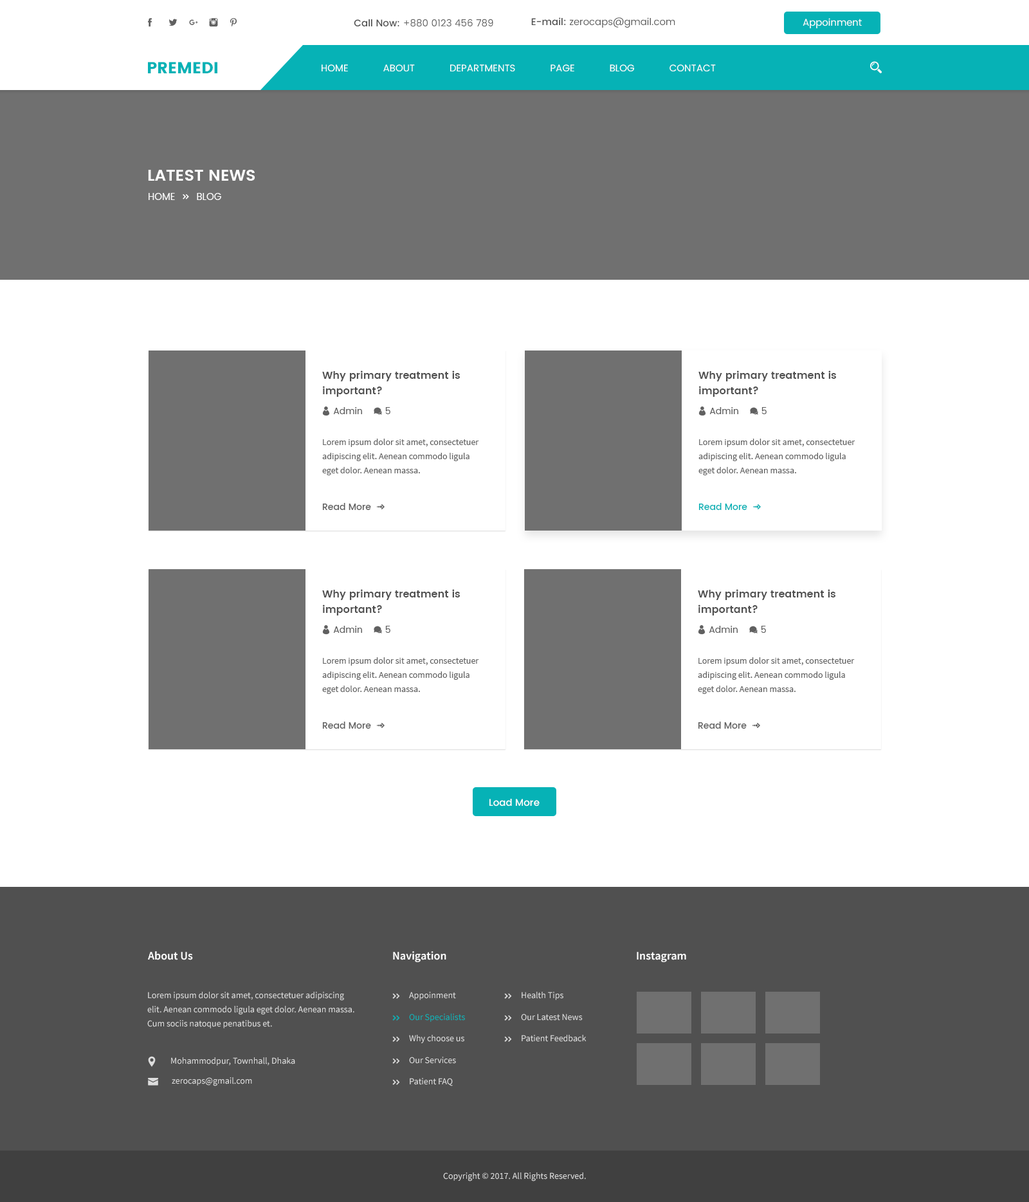
<style>
.page{position:relative;width:1029px;height:1202px;background:#ffffff}
.page>*{position:absolute;margin:0}
.t1{font:9.6px "Poppins-Regular";color:#606060}
.t2{font:9.6px "Poppins-Medium";color:#505050}
.t3{font:9.6px "Poppins-Regular";color:#fffefe}
.t4{font:16.1px "Poppins";color:#06b2b6}
.t5{font:9.6px "Poppins-Regular";color:#ffffff}
.t6{font:16.1px "Poppins-SemiBold";color:#ffffff}
.t7{font:10.3px/15.4px "Poppins-SemiBold";color:#505050}
.t8{font:9px/14.1px "SourceSansPro-Regular";color:#606060}
.t9{font:9px "Poppins-Medium";color:#606060}
.t10{font:9px "Poppins-Medium";color:#06b2b6}
.t11{font:9.6px "Poppins-Medium";color:#fefefe}
.t12{font:11.6px "SourceSansPro-Semibold";color:#ffffff}
.t13{font:9px/14.1px "SourceSansPro-Regular";color:#dddddd}
.t14{font:9px "SourceSansPro-Regular";color:#dddddd}
.t15{font:9px "SourceSansPro-Regular";color:#06b2b6}
</style>
<div class="page">
<p class="t1" style="left:531px;top:17px;width:144px;height:11px"><span class="t2">E-mail: </span>zerocaps@gmail.com</p>
<p class="t1" style="left:354px;top:19px;width:139px;height:8px"><span class="t2">Call Now: </span>+880 0123 456 789</p>
<p class="t3" style="left:802px;top:18px;width:59px;height:10px">Appoinment</p>
<p class="t4" style="left:148px;top:62px;width:69px;height:11px">PREMEDI</p>
<p class="t5" style="left:321px;top:64px;width:395px;height:7px">HOME            ABOUT            DEPARTMENTS            PAGE            BLOG            CONTACT</p>
<p class="t6" style="left:148px;top:170px;width:107px;height:11px">LATEST NEWS</p>
<p class="t7" style="left:322px;top:370px;width:138px;height:27px">Why primary treatment is<br>important?</p>
<p class="t7" style="left:698px;top:370px;width:138px;height:27px">Why primary treatment is<br>important?</p>
<p class="t8" style="left:322px;top:438px;width:157px;height:37px">Lorem ipsum dolor sit amet, consectetuer adipiscing elit. Aenean commodo ligula eget dolor. Aenean massa.</p>
<p class="t8" style="left:698px;top:438px;width:157px;height:37px">Lorem ipsum dolor sit amet, consectetuer adipiscing elit. Aenean commodo ligula eget dolor. Aenean massa.</p>
<p class="t9" style="left:322px;top:503px;width:49px;height:7px">Read More</p>
<p class="t10" style="left:698px;top:503px;width:49px;height:7px">Read More</p>
<p class="t7" style="left:322px;top:589px;width:138px;height:26px">Why primary treatment is<br>important?</p>
<p class="t7" style="left:698px;top:589px;width:137px;height:26px">Why primary treatment is<br>important?</p>
<p class="t8" style="left:322px;top:657px;width:157px;height:37px">Lorem ipsum dolor sit amet, consectetuer adipiscing elit. Aenean commodo ligula eget dolor. Aenean massa.</p>
<p class="t8" style="left:698px;top:657px;width:156px;height:37px">Lorem ipsum dolor sit amet, consectetuer adipiscing elit. Aenean commodo ligula eget dolor. Aenean massa.</p>
<p class="t9" style="left:322px;top:721px;width:49px;height:7px">Read More</p>
<p class="t9" style="left:698px;top:721px;width:48px;height:7px">Read More</p>
<p class="t11" style="left:489px;top:798px;width:50px;height:8px">Load More</p>
<p class="t12" style="left:148px;top:951px;width:45px;height:9px">About Us</p>
<p class="t12" style="left:393px;top:951px;width:53px;height:11px">Navigation</p>
<p class="t12" style="left:636px;top:951px;width:50px;height:11px">Instagram</p>
<p class="t13" style="left:147px;top:991px;width:207px;height:37px">Lorem ipsum dolor sit amet, consectetuer adipiscing elit. Aenean commodo ligula eget dolor. Aenean massa. Cum sociis natoque penatibus et.</p>
<p class="t14" style="left:409px;top:991px;width:47px;height:9px">Appoinment</p>
<p class="t14" style="left:521px;top:991px;width:42px;height:9px">Health Tips</p>
<p class="t15" style="left:409px;top:1013px;width:56px;height:9px">Our Specialists</p>
<p class="t14" style="left:521px;top:1013px;width:61px;height:7px">Our Latest News</p>
<p class="t14" style="left:409px;top:1034px;width:55px;height:9px">Why choose us</p>
<p class="t14" style="left:521px;top:1034px;width:65px;height:7px">Patient Feedback</p>
<p class="t14" style="left:171px;top:1057px;width:124px;height:8px">Mohammodpur, Townhall, Dhaka</p>
<p class="t14" style="left:409px;top:1056px;width:47px;height:7px">Our Services</p>
<p class="t14" style="left:172px;top:1077px;width:80px;height:9px">zerocaps@gmail.com</p>
<p class="t14" style="left:410px;top:1077px;width:43px;height:9px">Patient FAQ</p>
<p class="t14" style="left:443px;top:1172px;width:143px;height:9px">Copyright © 2017. All Rights Reserved.</p>
</div>
